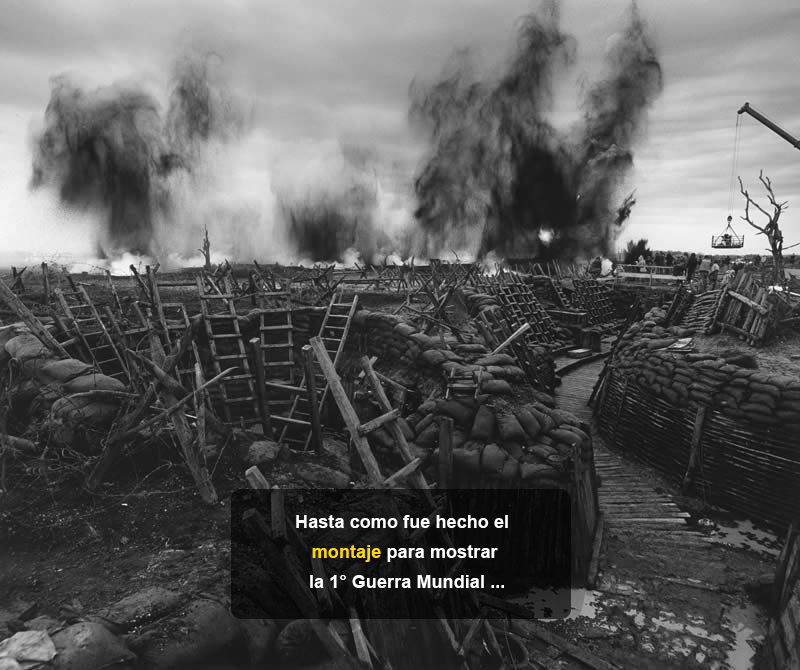
<style>
.page{position:relative;width:800px;height:670px}
.page>*{position:absolute;margin:0}
.t1{font:18px/30px "Arial-BoldMT";letter-spacing:0.005em;color:#ffffff}
.t2{font:18px/30px "Arial-BoldMT";letter-spacing:0.005em;color:#ffd800}
</style>
<div class="page">
<p class="t1" style="left:296px;top:515px;width:212px;height:73px;text-align:center">Hasta como fue hecho el <br><span class="t2">montaje </span>para mostrar<br> la 1° Guerra Mundial ...</p>
</div>
